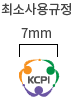
<style>
.page{position:relative;width:72px;height:98px;background:#ffffff}
.page>*{position:absolute;margin:0}
.t1{font:13px "NotoSansCJKkr-Regular";letter-spacing:-0.01em;color:#454545}
</style>
<div class="page">
<p class="t1" style="left:1px;top:3px;width:70px;height:13px">최소사용규정</p>
<p class="t1" style="left:21px;top:28px;width:30px;height:10px">7mm</p>
</div>
